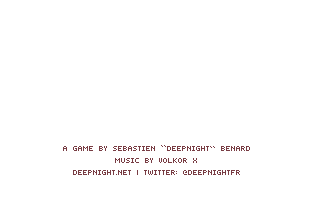
<style>
.page{position:relative;width:320px;height:200px;background:#ffffff}
.page>*{position:absolute;margin:0}
.t1{font:10px "SmallestPixel-7";color:#783c43}
</style>
<div class="page">
<p class="t1" style="left:63px;top:145px;width:187px;height:30px;text-align:center">a game by Sebastien “deepnight” Benard<br>MUSIC by VOLKOR X<br>deepnight.net | twitter: @deepnightFR</p>
</div>
